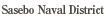
<style>
.page{position:relative;width:106px;height:19px;background:#ffffff}
.page>*{position:absolute;margin:0}
.t1{font:12px "RyuminPro-ExBold";letter-spacing:-0.04em;color:#4c4843;scale:0.9 1}
</style>
<div class="page">
<p class="t1" style="left:1px;top:5px;width:103px;height:10px">Sasebo Naval District</p>
</div>
